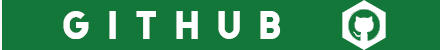
<style>
.page{position:relative;width:440px;height:50px;background:#127738}
.page>*{position:absolute;margin:0}
.t1{font:37.5px "TheNextFont";letter-spacing:0.48em;color:#ffffff}
</style>
<div class="page">
<p class="t1" style="left:63px;top:11px;width:218px;height:28px">GITHUB</p>
</div>
